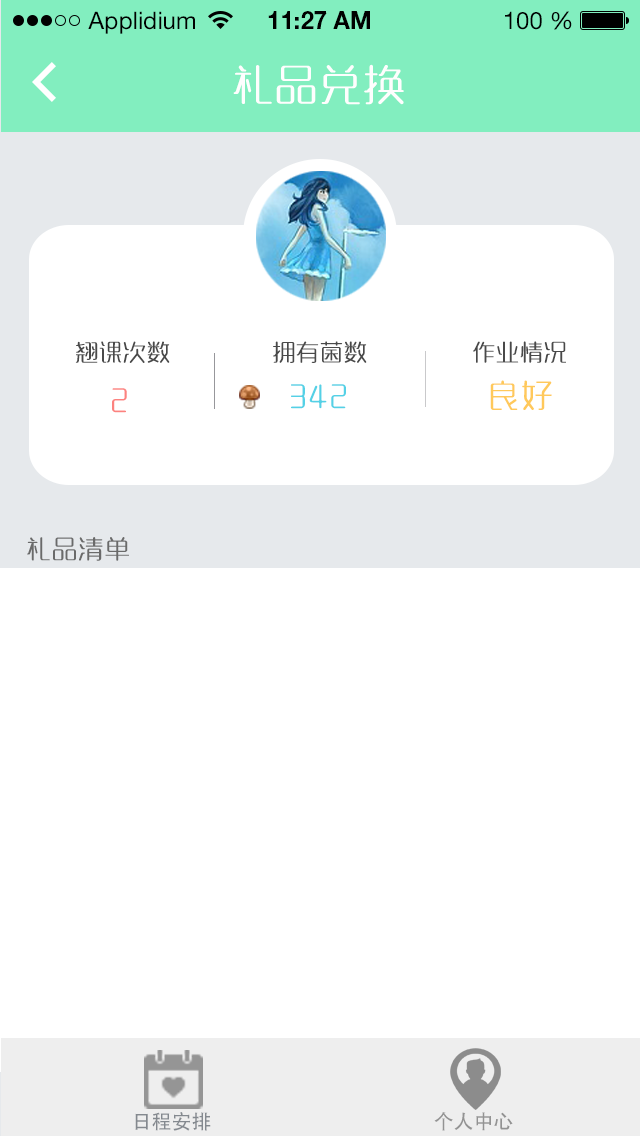
<style>
.page{position:relative;width:640px;height:1136px;background:#ffffff}
.page>*{position:absolute;margin:0}
.t1{font:24px "HelveticaNeueLTStd-Roman";color:#000000}
.t2{font:24px "HelveticaNeueLTStd-Bd";color:#000000}
.t3{font:40px "MFYaYuan_Noncommercial-Regular";letter-spacing:0.1em;color:#fefefe}
.t4{font:21.8px "MFYaYuan_Noncommercial-Regular";letter-spacing:0.1em;color:#494949}
.t5{font:30px "MFYaYuan_Noncommercial-Regular";letter-spacing:0.1em;color:#fc827f}
.t6{font:30px "MFYaYuan_Noncommercial-Regular";letter-spacing:0.1em;color:#54d1e6}
.t7{font:30px "MFYaYuan_Noncommercial-Regular";letter-spacing:0.1em;color:#ffc95b}
.t8{font:24px "MFYaYuan_Noncommercial-Regular";letter-spacing:0.1em;color:#6a6a6a}
.t9{font:20px "AdobeHeitiStd-Regular";color:#84898f}
.t10{font:20px "AdobeHeitiStd-Regular";color:#939393}
</style>
<div class="page">
<p class="t1" style="left:88px;top:11px;width:107px;height:23px">Applidium</p>
<p class="t2" style="left:268px;top:11px;width:102px;height:18px">11:27 AM</p>
<p class="t1" style="left:505px;top:11px;width:67px;height:19px">100 %</p>
<p class="t3" style="left:233px;top:64px;width:171px;height:41px">礼品兑换</p>
<p class="t4" style="left:75px;top:341px;width:95px;height:22px">翘课次数</p>
<p class="t4" style="left:273px;top:341px;width:94px;height:22px">拥有菌数</p>
<p class="t4" style="left:473px;top:341px;width:93px;height:22px">作业情况</p>
<p class="t5" style="left:112px;top:388px;width:15px;height:25px">2</p>
<p class="t6" style="left:291px;top:384px;width:55px;height:25px">342</p>
<p class="t7" style="left:490px;top:380px;width:62px;height:30px">良好</p>
<p class="t8" style="left:27px;top:537px;width:102px;height:24px">礼品清单</p>
<p class="t9" style="left:135px;top:1112px;width:76px;height:19px">日程安排</p>
<p class="t10" style="left:434px;top:1112px;width:79px;height:19px">个人中心</p>
</div>
